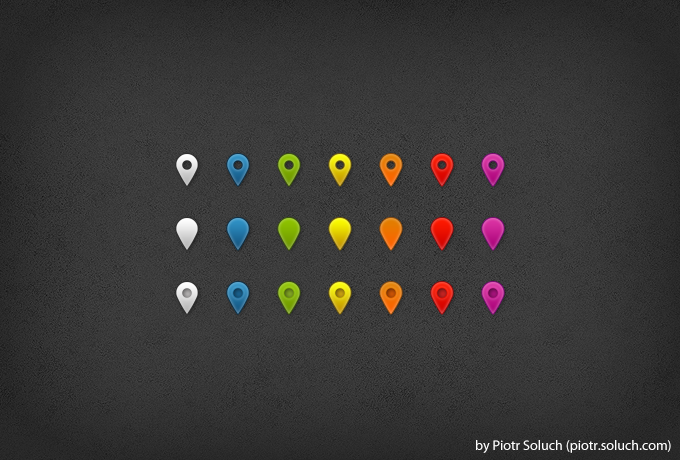
<style>
.page{position:relative;width:680px;height:460px}
.page>*{position:absolute;margin:0}
.t1{font:14px "MyriadPro-Regular";color:#ffffff}
</style>
<div class="page">
<p class="t1" style="left:476px;top:440px;width:195px;height:13px">by Piotr Soluch (piotr.soluch.com)</p>
</div>
